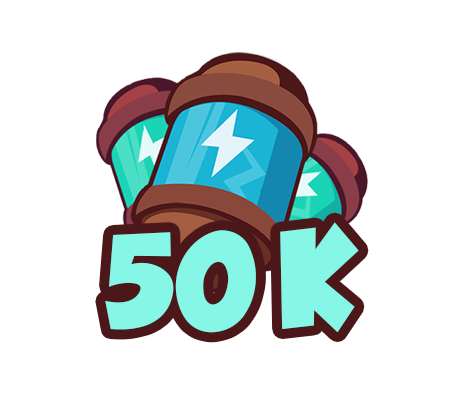
<style>
.page{position:relative;width:464px;height:410px;background:#ffffff}
.page>*{position:absolute;margin:0}
.t1{font:120px "TadeoFont-Bold";letter-spacing:0.01em;color:#86f6e6}
.t2{font:120px "TadeoFont-Bold";letter-spacing:0.21em;color:#86f6e6}
.t3{font:150px "TadeoFont-Bold";letter-spacing:0.21em;color:#86f6e6}
</style>
<div class="page">
<p class="t1" style="left:105px;top:222px;width:254px;height:111px">5<span class="t2">0</span><span class="t3">K</span></p>
</div>
